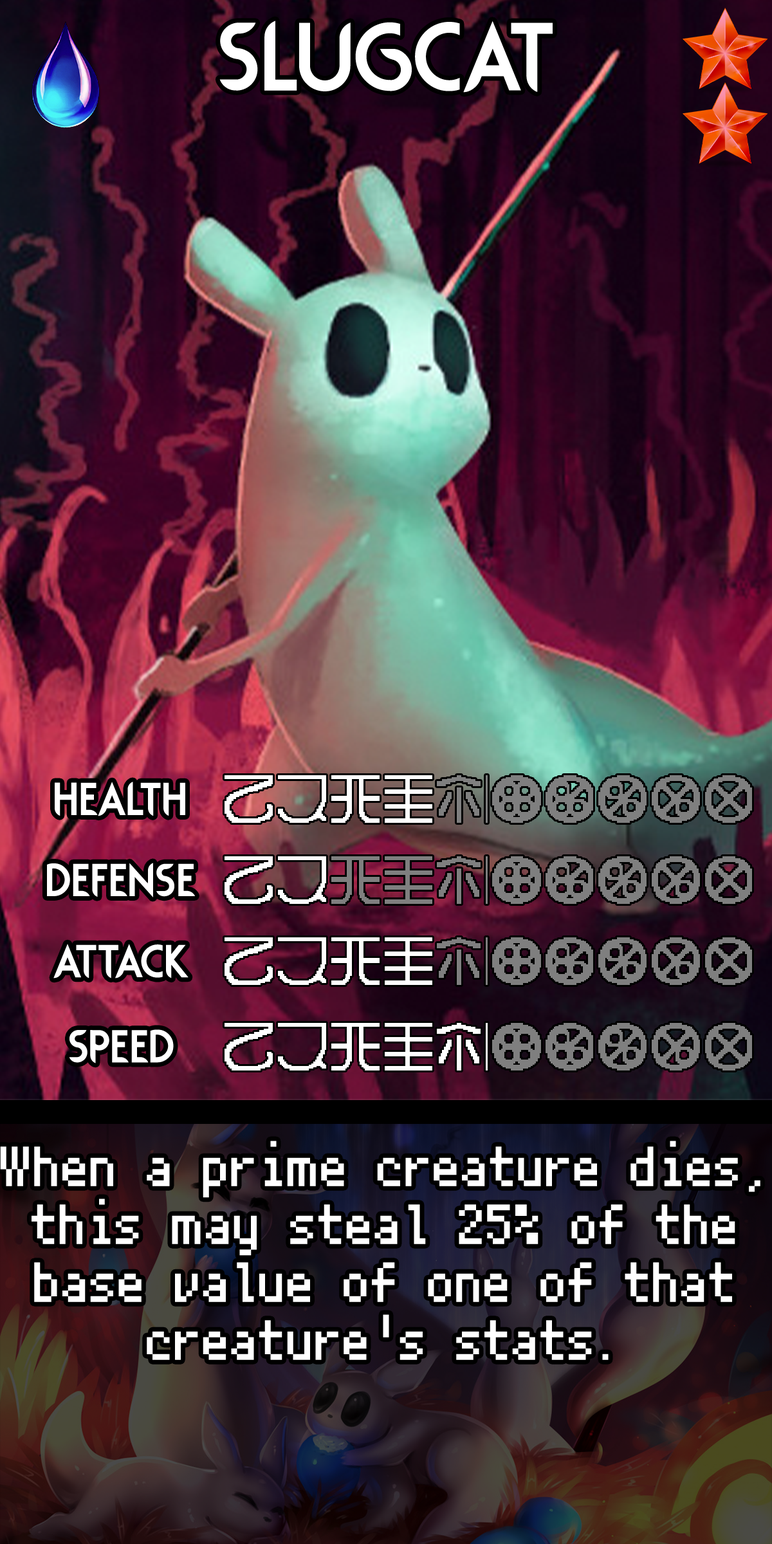
<style>
.page{position:relative;width:772px;height:1544px}
.page>*{position:absolute;margin:0}
.t1{font:194.3px "Rodondo";color:#ffffff}
.t2{font:92.7px "Rodondo";color:#ffffff}
.t3{font:96.5px/57.9px "PixelMplus10-Regular";color:#ffffff}
</style>
<div class="page">
<p class="t1" style="left:219px;top:21px;width:334px;height:72px">Slugcat</p>
<p class="t2" style="left:55px;top:782px;width:130px;height:35px">Health</p>
<p class="t2" style="left:47px;top:863px;width:148px;height:35px">Defense</p>
<p class="t2" style="left:53px;top:944px;width:136px;height:35px">Attack</p>
<p class="t2" style="left:69px;top:1030px;width:105px;height:34px">Speed</p>
<p class="t3" style="left:0px;top:1141px;width:761px;height:219px;text-align:center">When a prime creature dies, this may steal 25% of the base value of one of that creature's stats.</p>
</div>
